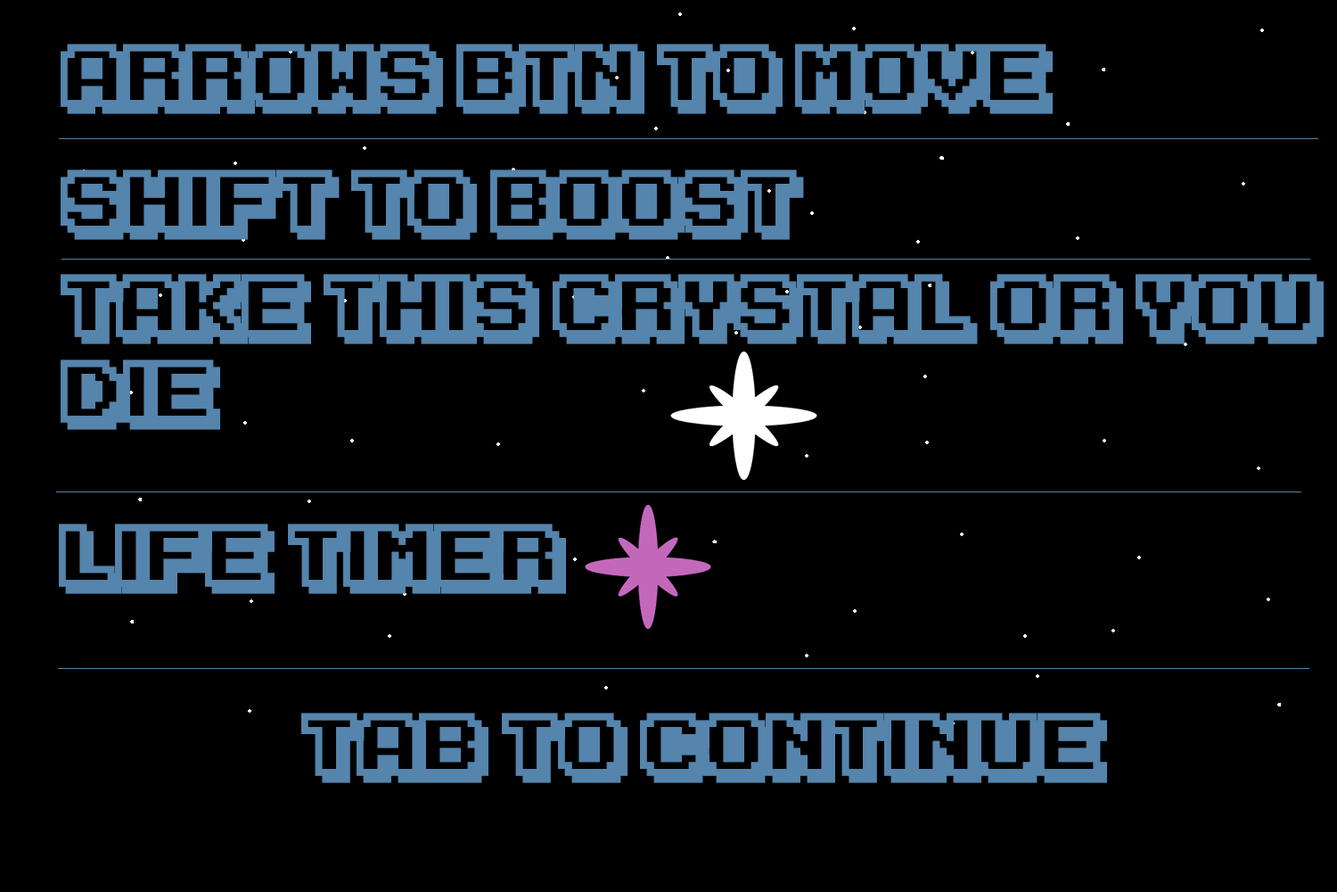
<style>
.page{position:relative;width:1337px;height:892px;background:#000000}
.page>*{position:absolute;margin:0}
.t1{font:71.3px "KarmaticArcade";color:#5584ac}
</style>
<div class="page">
<p class="t1" style="left:61px;top:44px;width:992px;height:70px">arRows btn to move</p>
<p class="t1" style="left:61px;top:169px;width:743px;height:71px">Shift to boost</p>
<p class="t1" style="left:61px;top:274px;width:1263px;height:156px">Take this crystal or you die,</p>
<p class="t1" style="left:59px;top:523px;width:507px;height:71px">life timer</p>
<p class="t1" style="left:301px;top:712px;width:806px;height:71px">Tab to continue</p>
</div>
